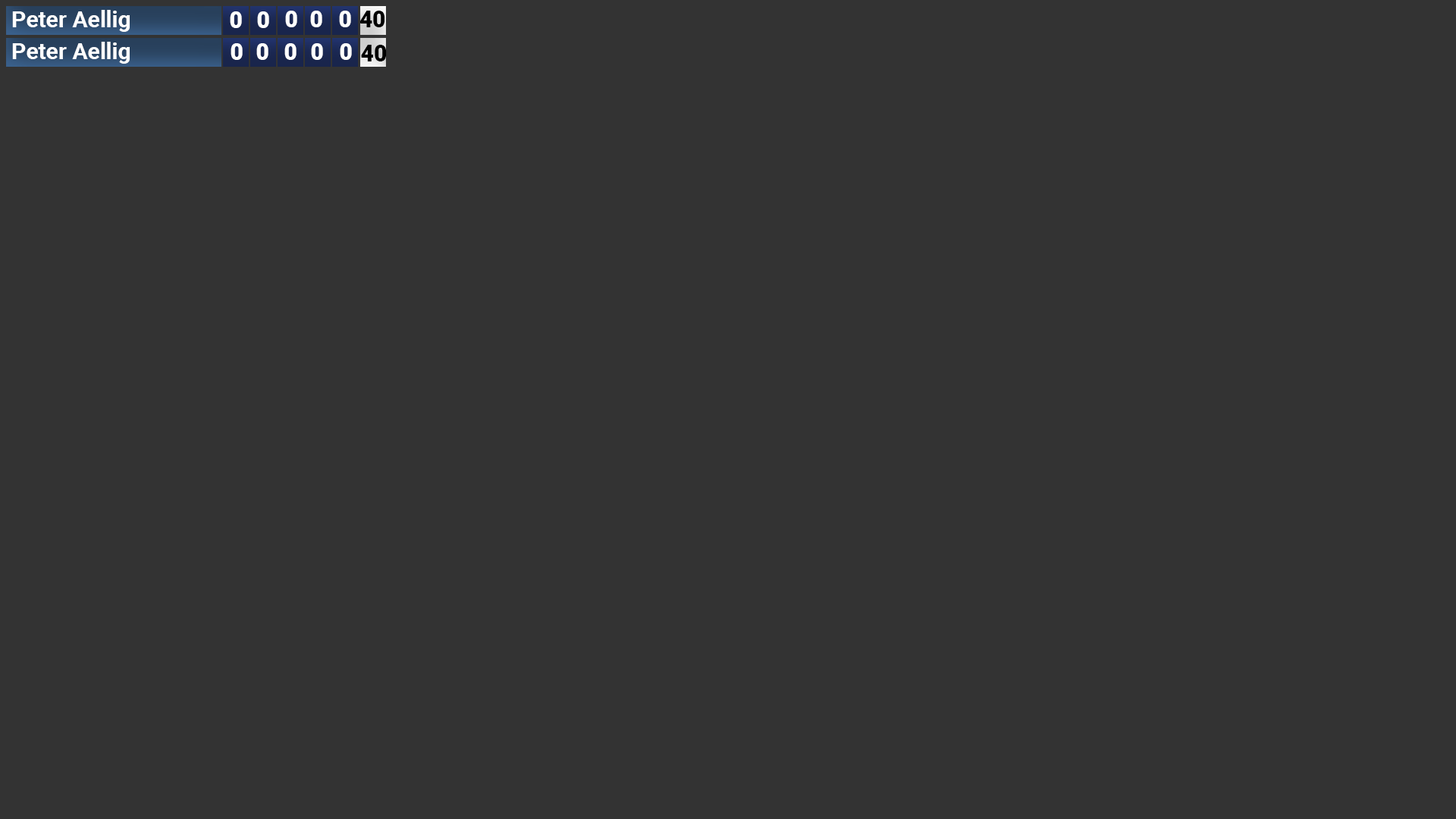
<style>
.page{position:relative;width:1456px;height:819px;background:#333333}
.page>*{position:absolute;margin:0}
.t1{font:22.7px "Roboto-Bold";color:#ffffff}
.t2{font:22.7px "Roboto-Black";color:#ffffff}
.t3{font:22.7px "Roboto-Black";color:#000000}
</style>
<div class="page">
<p class="t1" style="left:12px;top:10px;width:118px;height:22px">Peter Aellig</p>
<p class="t2" style="left:230px;top:11px;width:12px;height:17px">0</p>
<p class="t2" style="left:257px;top:11px;width:12px;height:17px">0</p>
<p class="t2" style="left:285px;top:11px;width:12px;height:16px">0</p>
<p class="t2" style="left:310px;top:11px;width:12px;height:16px">0</p>
<p class="t2" style="left:339px;top:11px;width:12px;height:16px">0</p>
<p class="t3" style="left:359px;top:11px;width:26px;height:16px">40</p>
<p class="t1" style="left:12px;top:42px;width:118px;height:22px">Peter Aellig</p>
<p class="t2" style="left:231px;top:43px;width:12px;height:17px">0</p>
<p class="t2" style="left:256px;top:43px;width:12px;height:17px">0</p>
<p class="t2" style="left:284px;top:43px;width:13px;height:17px">0</p>
<p class="t2" style="left:311px;top:43px;width:12px;height:17px">0</p>
<p class="t2" style="left:340px;top:43px;width:12px;height:17px">0</p>
<p class="t3" style="left:361px;top:45px;width:26px;height:16px">40</p>
</div>
